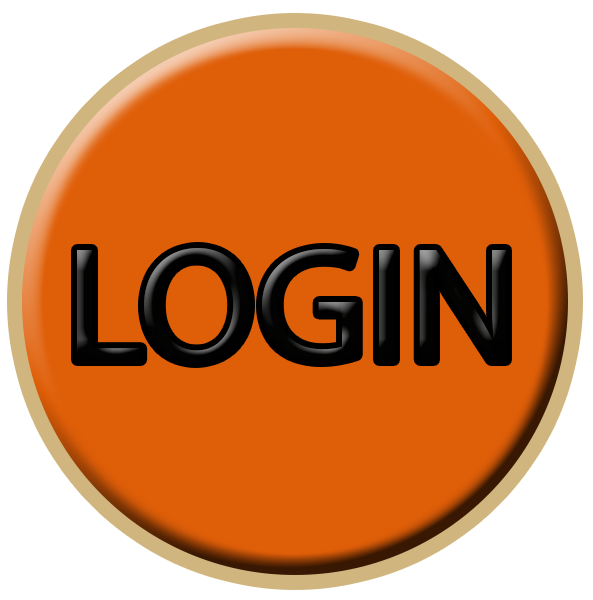
<style>
.page{position:relative;width:593px;height:600px;background:#df5e08}
.page>*{position:absolute;margin:0}
.t1{font:229.2px "MyriadArabic-Regular";color:#000000;scale:1.04 1}
</style>
<div class="page">
<p class="t1" style="left:77px;top:248px;width:429px;height:114px">LOGIN</p>
</div>
